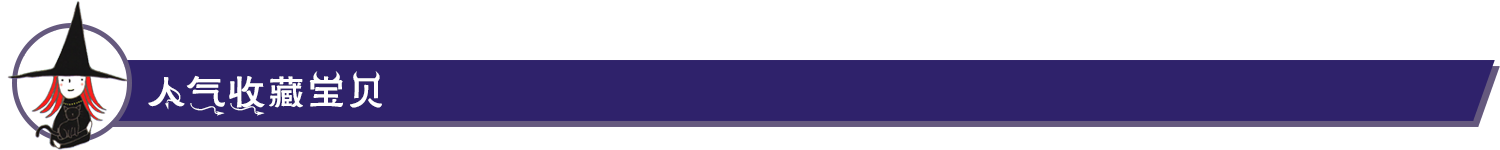
<style>
.page{position:relative;width:1500px;height:150px;background:#ffffff}
.page>*{position:absolute;margin:0}
.t1{font:40px "FZHLJW--GB1-0";color:#ffffff}
</style>
<div class="page">
<p class="t1" style="left:148px;top:71px;width:234px;height:45px">人气收藏宝贝</p>
</div>
